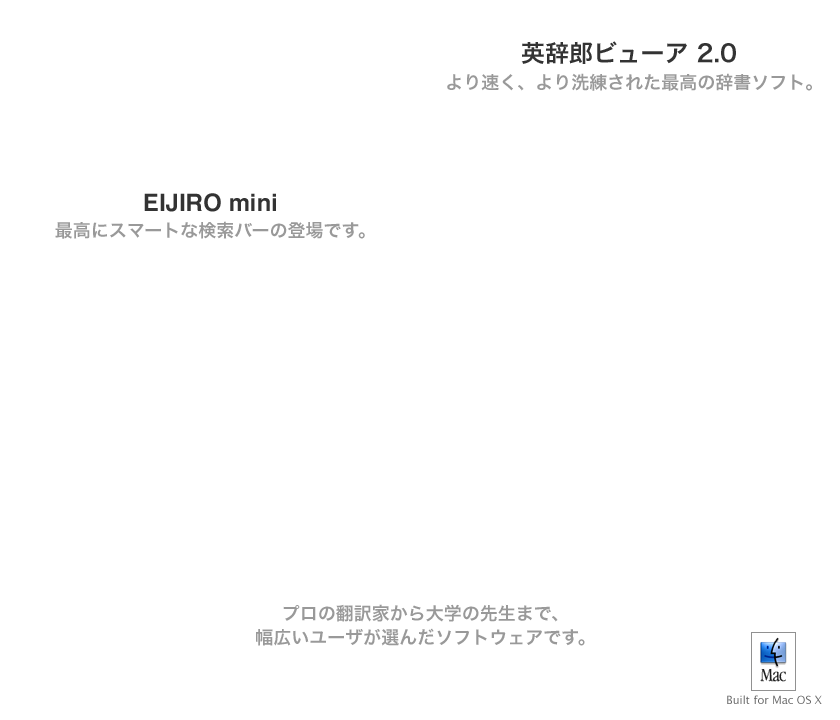
<style>
.page{position:relative;width:840px;height:720px;background:#ffffff}
.page>*{position:absolute;margin:0}
.t1{font:24px "HiraKakuPro-W6";color:#333333}
.t2{font:18px "HiraKakuPro-W6";color:#999999}
.t3{font:24px "Helvetica-Bold";color:#333333}
.t4{font:18px/24px "HiraKakuPro-W6";color:#999999}
.t5{font:11px "LucidaGrande";color:#666666}
</style>
<div class="page">
<p class="t1" style="left:521px;top:41px;width:215px;height:23px">英辞郎ビューア 2.0</p>
<p class="t2" style="left:447px;top:73px;width:365px;height:18px">より速く、より洗練された最高の辞書ソフト。</p>
<p class="t3" style="left:144px;top:193px;width:132px;height:19px">EIJIRO mini</p>
<p class="t2" style="left:55px;top:221px;width:310px;height:18px">最高にスマートな検索バーの登場です。</p>
<p class="t4" style="left:256px;top:604px;width:329px;height:42px;text-align:center">プロの翻訳家から大学の先生まで、<br>幅広いユーザが選んだソフトウェアです。</p>
<p class="t5" style="left:727px;top:695px;width:95px;height:9px">Built for Mac OS X</p>
</div>
